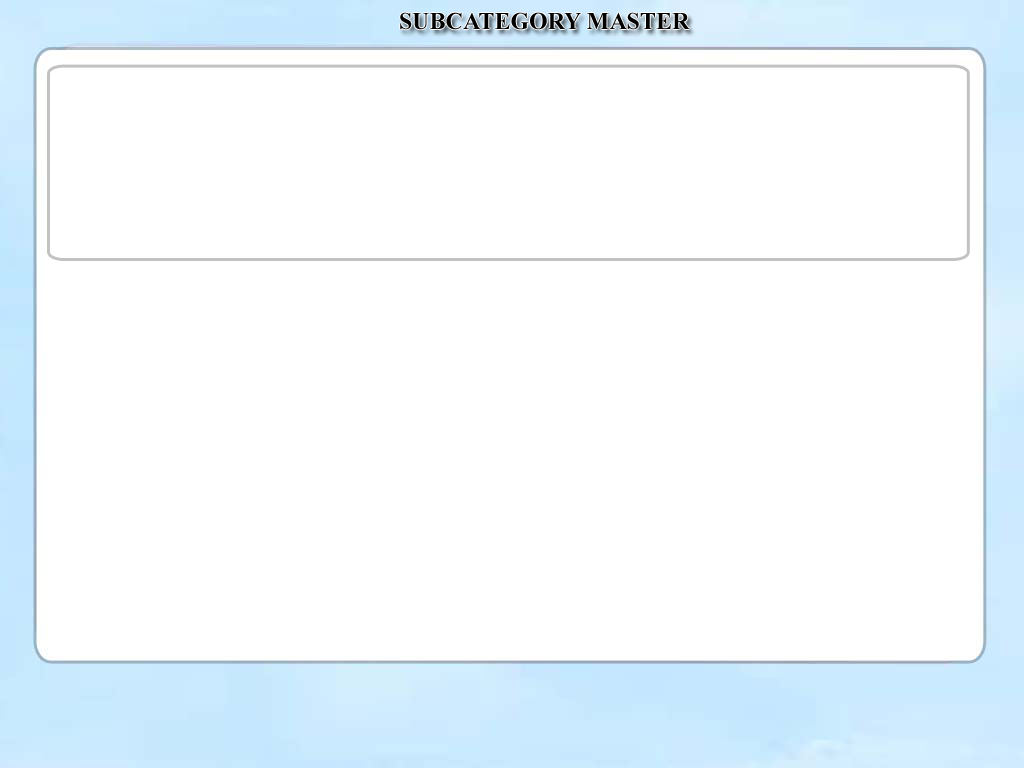
<style>
.page{position:relative;width:1024px;height:768px;background:#ffffff}
.page>*{position:absolute;margin:0}
.t1{font:24px "TimesNewRomanPS-BoldMT";color:#000000}
</style>
<div class="page">
<p class="t1" style="left:400px;top:12px;width:290px;height:18px">SUBCATEGORY MASTER</p>
</div>
